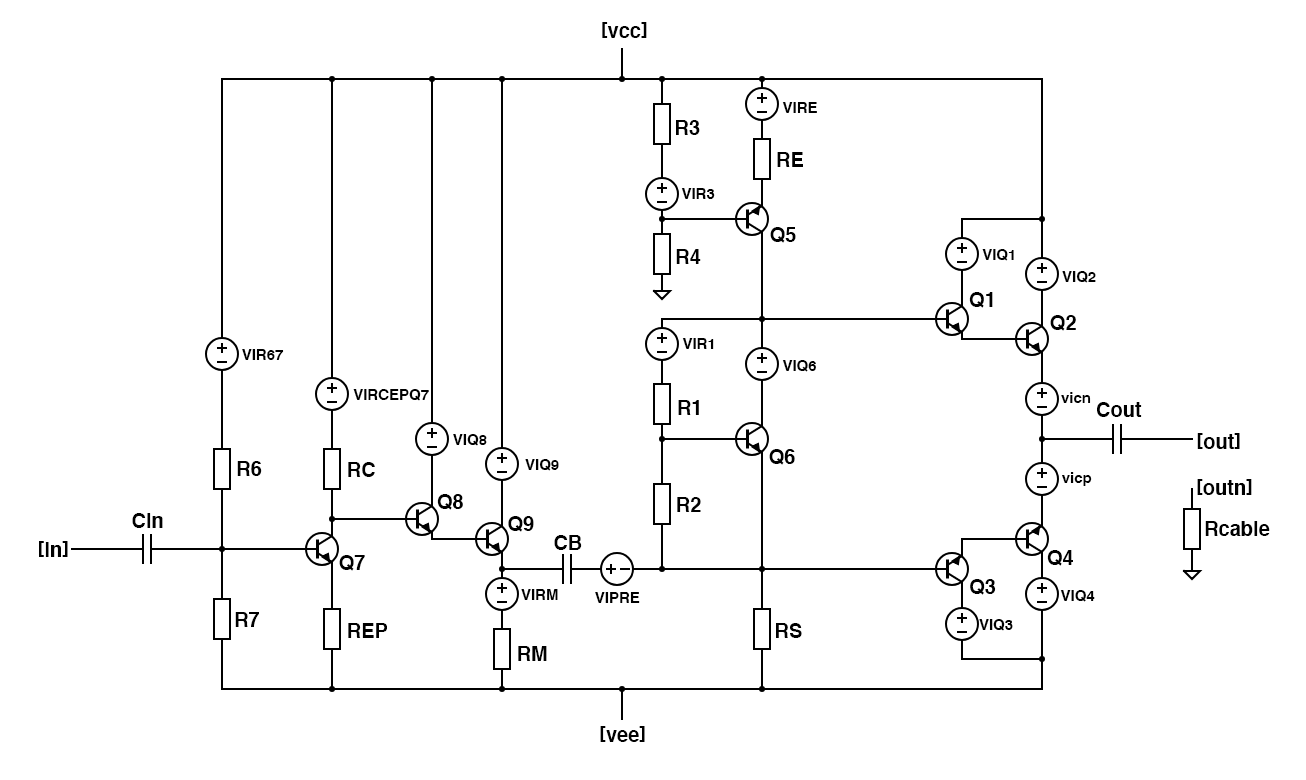
<style>
.page{position:relative;width:1306px;height:780px;background:#ffffff}
.page>*{position:absolute;margin:0}
.t1{font:20px "Helvetica-Bold";color:#000000}
.t2{font:15px "Helvetica-Bold";color:#000000}
</style>
<div class="page">
<p class="t1" style="left:602px;top:22px;width:45px;height:16px">[vcc]</p>
<p class="t2" style="left:782px;top:102px;width:35px;height:11px">VIRE</p>
<p class="t1" style="left:676px;top:120px;width:24px;height:15px">R3</p>
<p class="t1" style="left:777px;top:152px;width:26px;height:15px">RE</p>
<p class="t2" style="left:681px;top:188px;width:34px;height:11px">VIR3</p>
<p class="t1" style="left:770px;top:227px;width:26px;height:16px">Q5</p>
<p class="t1" style="left:676px;top:249px;width:25px;height:15px">R4</p>
<p class="t2" style="left:982px;top:249px;width:32px;height:12px">VIQ1</p>
<p class="t2" style="left:1062px;top:271px;width:34px;height:12px">VIQ2</p>
<p class="t1" style="left:969px;top:292px;width:24px;height:16px">Q1</p>
<p class="t1" style="left:1050px;top:315px;width:26px;height:16px">Q2</p>
<p class="t2" style="left:682px;top:338px;width:32px;height:11px">VIR1</p>
<p class="t2" style="left:242px;top:349px;width:42px;height:11px">VIR67</p>
<p class="t2" style="left:782px;top:360px;width:34px;height:12px">VIQ6</p>
<p class="t2" style="left:353px;top:389px;width:76px;height:12px">VIRCEPQ7</p>
<p class="t1" style="left:678px;top:400px;width:21px;height:15px">R1</p>
<p class="t2" style="left:1061px;top:392px;width:30px;height:11px">vicn</p>
<p class="t1" style="left:1097px;top:402px;width:45px;height:15px">Cout</p>
<p class="t2" style="left:453px;top:434px;width:34px;height:12px">VIQ8</p>
<p class="t1" style="left:1197px;top:433px;width:43px;height:16px">[out]</p>
<p class="t1" style="left:769px;top:449px;width:26px;height:16px">Q6</p>
<p class="t1" style="left:237px;top:461px;width:25px;height:15px">R6</p>
<p class="t1" style="left:348px;top:462px;width:27px;height:15px">RC</p>
<p class="t2" style="left:525px;top:459px;width:34px;height:12px">VIQ9</p>
<p class="t2" style="left:1062px;top:472px;width:30px;height:14px">vicp</p>
<p class="t1" style="left:1197px;top:479px;width:55px;height:16px">[outn]</p>
<p class="t1" style="left:437px;top:494px;width:26px;height:16px">Q8</p>
<p class="t1" style="left:677px;top:497px;width:24px;height:15px">R2</p>
<p class="t1" style="left:132px;top:513px;width:31px;height:15px">Cin</p>
<p class="t1" style="left:508px;top:516px;width:26px;height:16px">Q9</p>
<p class="t1" style="left:1205px;top:521px;width:65px;height:15px">Rcable</p>
<p class="t1" style="left:39px;top:541px;width:29px;height:16px">[in]</p>
<p class="t1" style="left:554px;top:535px;width:28px;height:15px">CB</p>
<p class="t1" style="left:339px;top:555px;width:26px;height:16px">Q7</p>
<p class="t1" style="left:1047px;top:550px;width:26px;height:16px">Q4</p>
<p class="t1" style="left:970px;top:579px;width:26px;height:16px">Q3</p>
<p class="t2" style="left:521px;top:589px;width:37px;height:11px">VIRM</p>
<p class="t2" style="left:595px;top:592px;width:45px;height:11px">VIPRE</p>
<p class="t2" style="left:1060px;top:590px;width:35px;height:12px">VIQ4</p>
<p class="t1" style="left:235px;top:612px;width:24px;height:15px">R7</p>
<p class="t1" style="left:348px;top:623px;width:39px;height:15px">REP</p>
<p class="t1" style="left:776px;top:623px;width:26px;height:15px">RS</p>
<p class="t2" style="left:979px;top:619px;width:34px;height:12px">VIQ3</p>
<p class="t1" style="left:518px;top:646px;width:29px;height:15px">RM</p>
<p class="t1" style="left:600px;top:726px;width:45px;height:16px">[vee]</p>
</div>
